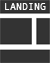
<style>
.page{position:relative;width:50px;height:63px;background:#333333}
.page>*{position:absolute;margin:0}
.t1{font:10px "AndaleMono";color:#ffffff}
</style>
<div class="page">
<p class="t1" style="left:5px;top:3px;width:41px;height:7px">LANDING</p>
</div>
